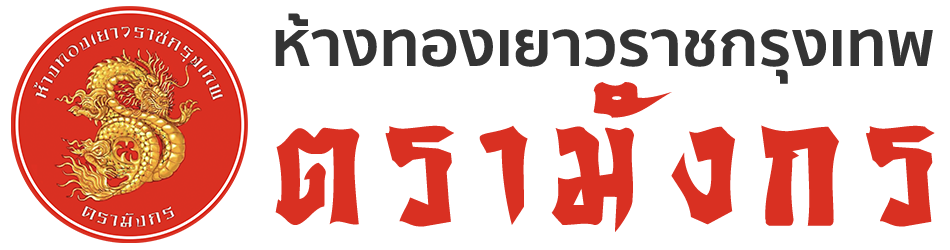
<style>
.page{position:relative;width:950px;height:250px;background:#ffffff}
.page>*{position:absolute;margin:0}
.t1{font:63.5px "SukhumvitSet-Bold";letter-spacing:0.01em;color:#343434}
.t2{font:243.4px "DSNYaoWaRat";letter-spacing:0.05em;color:#d93022}
</style>
<div class="page">
<p class="t1" style="left:275px;top:13px;width:658px;height:71px">ห้างทองเยาวราชกรุงเทพ</p>
<p class="t2" style="left:275px;top:82px;width:660px;height:150px">ตรามังกร</p>
</div>
